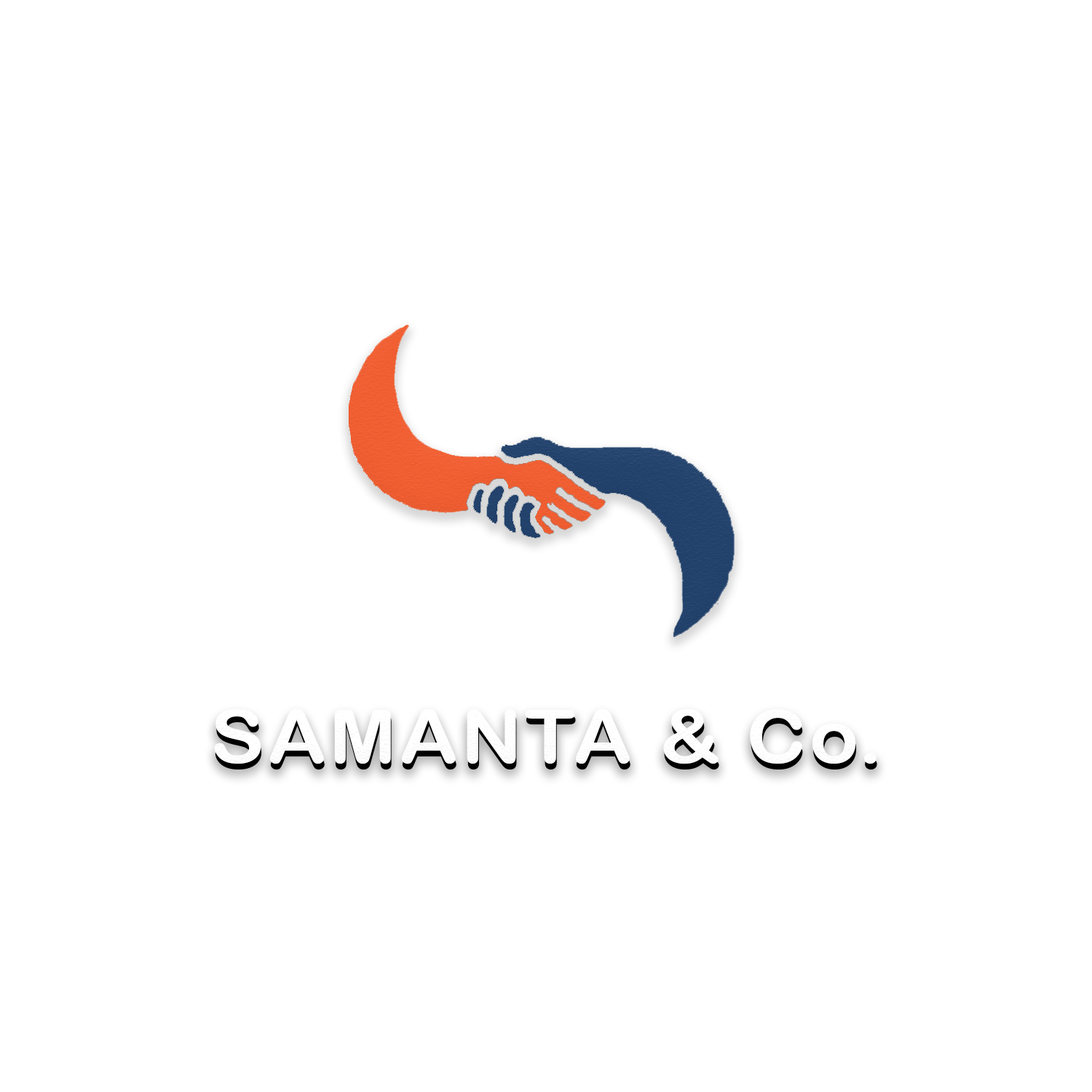
<style>
.page{position:relative;width:1092px;height:1092px;background:#ffffff}
.page>*{position:absolute;margin:0}
.t1{font:74.4px "ArialRoundedMTBold";letter-spacing:0.04em;scale:1.09 1}
</style>
<div class="page">
<p class="t1" style="left:215px;top:715px;width:662px;height:54px">SAMANTA &amp; Co.</p>
</div>
